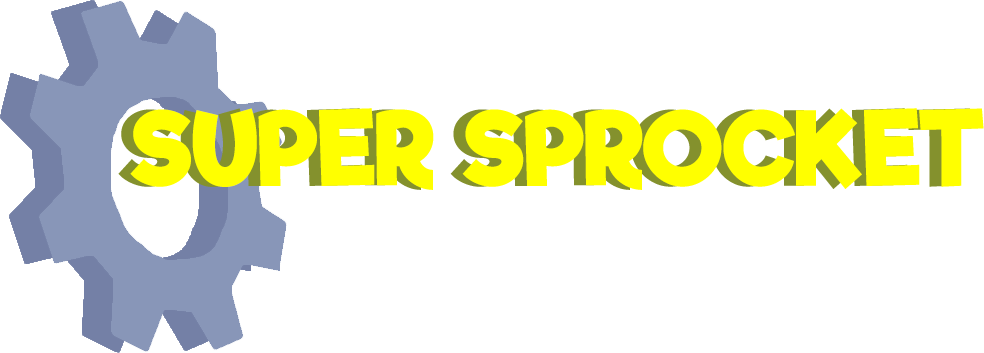
<style>
.page{position:relative;width:984px;height:353px;background:#ffffff}
.page>*{position:absolute;margin:0}
.t1{font:100px "RifficFree-Bold";color:#ffff00}
</style>
<div class="page">
<p class="t1" style="left:130px;top:108px;width:854px;height:82px">SUPER SPROCKET</p>
</div>
